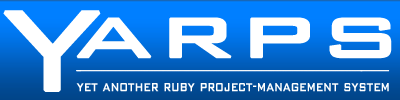
<style>
.page{position:relative;width:400px;height:100px}
.page>*{position:absolute;margin:0}
.t1{font:150.8px "BankGothic-Light";color:#ffffff;font-weight:bold}
.t2{font:90px "BankGothic-Light";color:#ffffff;font-weight:bold;scale:1.41 1}
.t3{font:18.4px "BankGothic-Light";color:#ffffff;font-weight:bold;scale:0.66 1}
</style>
<div class="page">
<p class="t1" style="left:3px;top:10px;width:98px;height:82px">Y</p>
<p class="t2" style="left:76px;top:17px;width:316px;height:42px">arps</p>
<p class="t3" style="left:76px;top:83px;width:313px;height:9px">yet another ruby project-management system</p>
</div>
